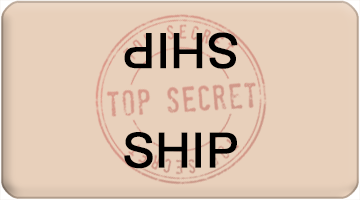
<style>
.page{position:relative;width:360px;height:200px;background:#e8d0bb}
.page>*{position:absolute;margin:0}
.t1{font:48px "ArialMT";color:#000000;font-weight:bold}
</style>
<div class="page">
<p class="t1" style="left:124px;top:32px;width:114px;height:37px;rotate:180deg">SHIP</p>
<p class="t1" style="left:124px;top:132px;width:113px;height:37px">SHIP</p>
</div>
